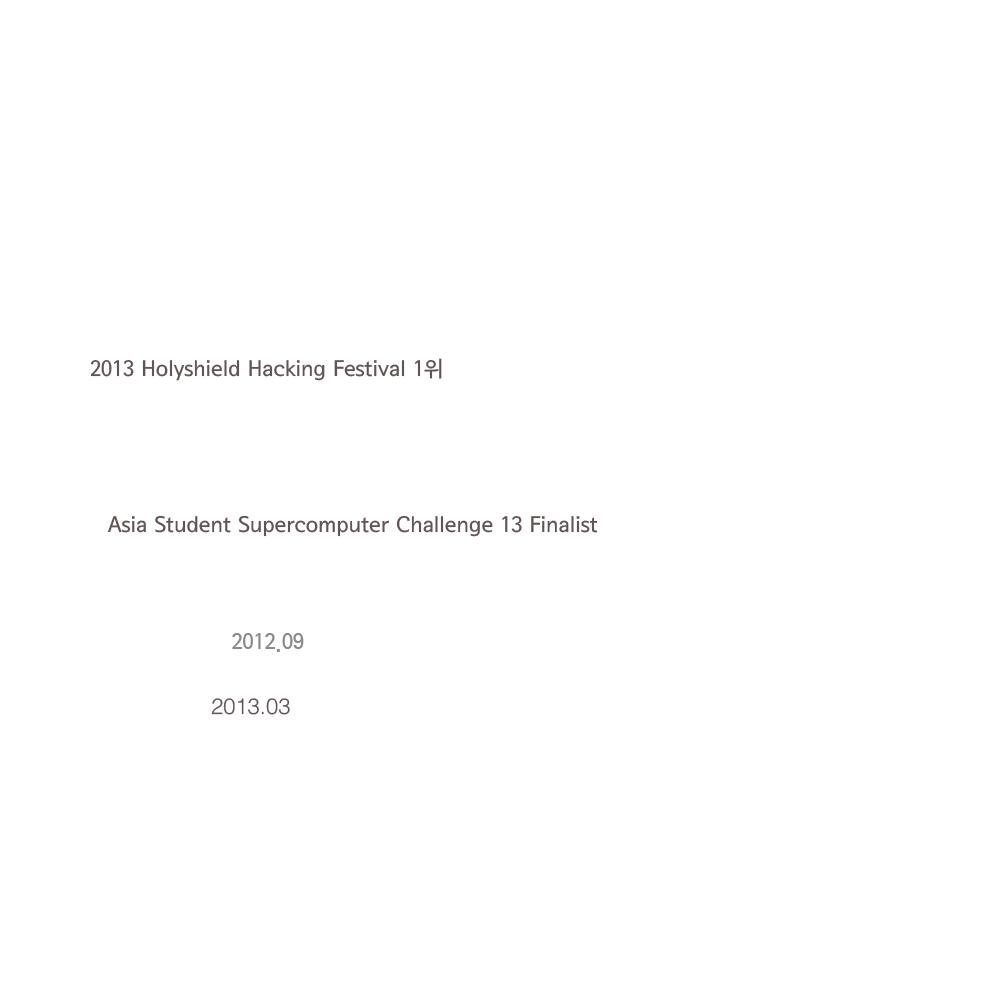
<style>
.page{position:relative;width:1000px;height:1000px;background:#ffffff}
.page>*{position:absolute;margin:0}
.t1{font:22px "SeoulNamsanB";color:#615454}
.t2{font:22px "SeoulNamsanB";color:#8a8a8a}
.t3{font:22px "Helvetica-Light";color:#615454}
</style>
<div class="page">
<p class="t1" style="left:90px;top:358px;width:352px;height:23px">2013 Holyshield Hacking Festival 1위</p>
<p class="t1" style="left:108px;top:515px;width:490px;height:22px">Asia Student Supercomputer Challenge 13 Finalist</p>
<p class="t2" style="left:232px;top:633px;width:72px;height:19px">2012.09</p>
<p class="t3" style="left:211px;top:698px;width:79px;height:17px">2013.03</p>
</div>
